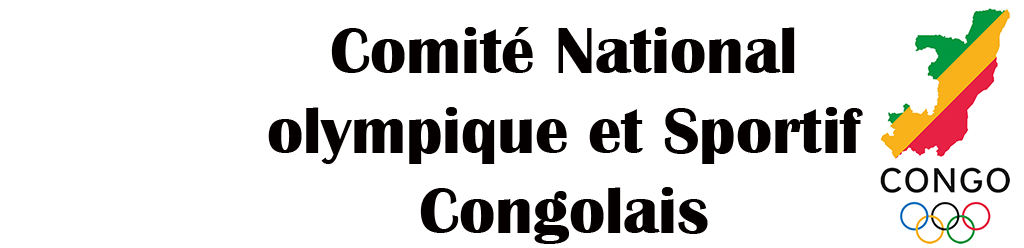
<style>
.page{position:relative;width:1024px;height:248px;background:#ffffff}
.page>*{position:absolute;margin:0}
.t1{font:66.7px "BritannicBold";color:#040000}
</style>
<div class="page">
<p class="t1" style="left:268px;top:27px;width:595px;height:217px;text-align:center">Comité National<br>olympique et Sportif<br>Congolais</p>
</div>
